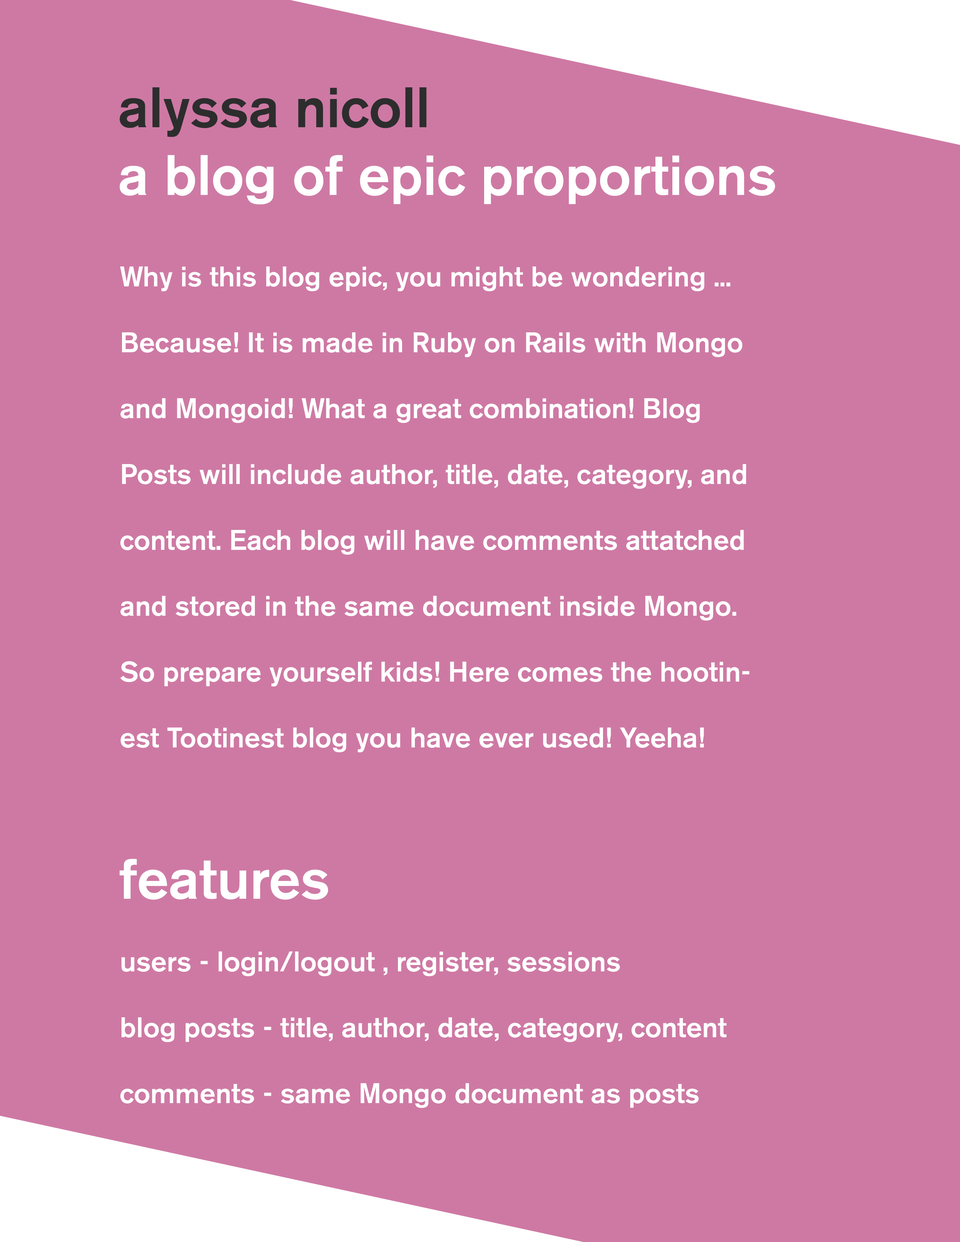
<style>
.page{position:relative;width:960px;height:1242px;background:#ce79a4}
.page>*{position:absolute;margin:0}
.t1{font:56.5px "AkzidenzGroteskBE-Md";color:#2d2d2d}
.t2{font:56.5px "AkzidenzGroteskBE-Md";color:#ffffff}
.t3{font:28.2px/65.9px "AkzidenzGroteskBE-Md";color:#ffffff}
</style>
<div class="page">
<p class="t1" style="left:120px;top:87px;width:307px;height:50px">alyssa nicoll</p>
<p class="t2" style="left:120px;top:155px;width:655px;height:49px">a blog of epic proportions</p>
<p class="t3" style="left:120px;top:267px;width:629px;height:485px">Why is this blog epic, you might be wondering ... Because! It is made in Ruby on Rails with Mongo and Mongoid! What a great combination! Blog Posts will include author, title, date, category, and content. Each blog will have comments attatched and stored in the same document inside Mongo.  So prepare yourself kids! Here comes the hootinest Tootinest blog you have ever used! Yeeha!</p>
<p class="t2" style="left:119px;top:859px;width:209px;height:41px">features</p>
<p class="t3" style="left:120px;top:952px;width:607px;height:156px">users - login/logout , register, sessions<br>blog posts - title, author, date, category, content<br>comments - same Mongo document as posts</p>
</div>
